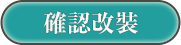
<style>
.page{position:relative;width:181px;height:45px;background:#239e9f}
.page>*{position:absolute;margin:0}
.t1{font:24px "RyuminPr6N-ExBold";color:#fff6f2}
</style>
<div class="page">
<p class="t1" style="left:43px;top:11px;width:95px;height:23px">確認改裝</p>
</div>
